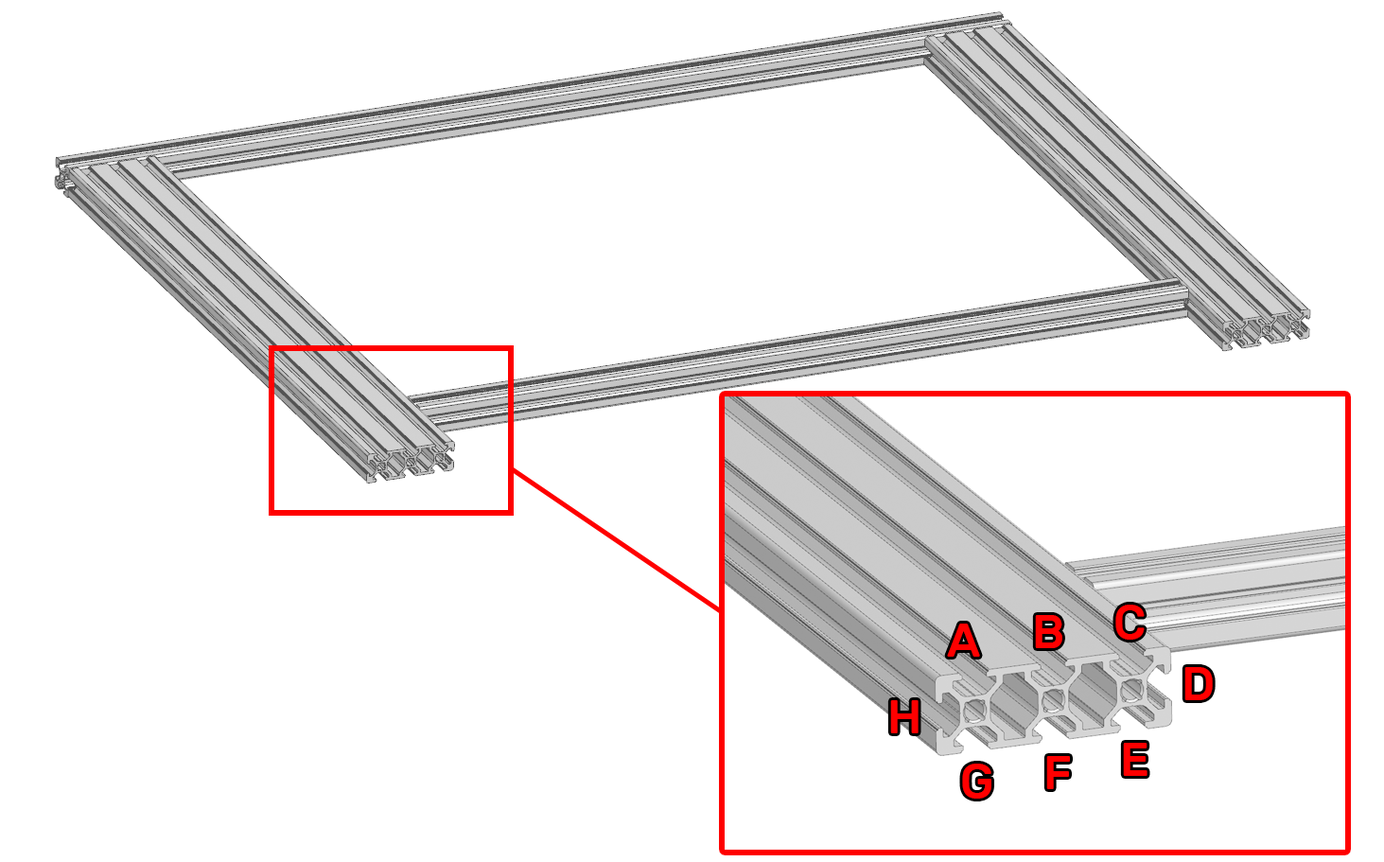
<style>
.page{position:relative;width:1384px;height:862px;background:#ffffff}
.page>*{position:absolute;margin:0}
.t1{font:47.3px "Rubik-Medium";color:#ff0000}
</style>
<div class="page">
<p class="t1" style="left:1115px;top:604px;width:30px;height:35px">C</p>
<p class="t1" style="left:1035px;top:615px;width:27px;height:33px">B</p>
<p class="t1" style="left:947px;top:623px;width:33px;height:33px">А</p>
<p class="t1" style="left:1184px;top:667px;width:29px;height:33px">D</p>
<p class="t1" style="left:890px;top:700px;width:28px;height:33px">H</p>
<p class="t1" style="left:1123px;top:743px;width:24px;height:33px">E</p>
<p class="t1" style="left:1046px;top:756px;width:24px;height:33px">F</p>
<p class="t1" style="left:962px;top:763px;width:29px;height:35px">G</p>
</div>
